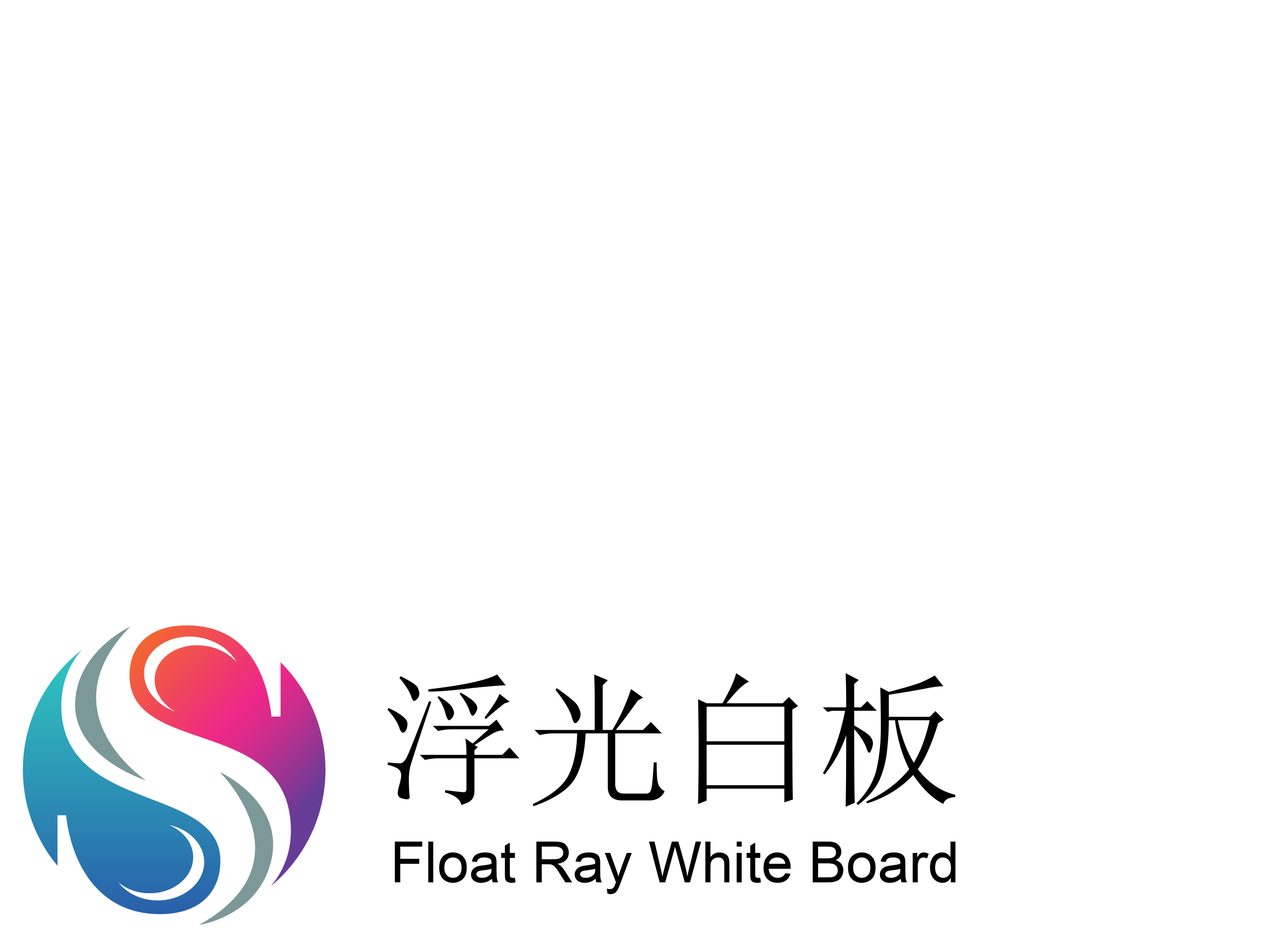
<style>
.page{position:relative;width:1264px;height:943px;background:#ffffff}
.page>*{position:absolute;margin:0}
.t1{font:145.3px "NSimSun";color:#000000}
.t2{font:56.6px "ArialMT";color:#000000}
</style>
<div class="page">
<p class="t1" style="left:388px;top:673px;width:567px;height:134px">浮光白板</p>
<p class="t2" style="left:395px;top:842px;width:561px;height:52px">Float Ray White Board</p>
</div>
